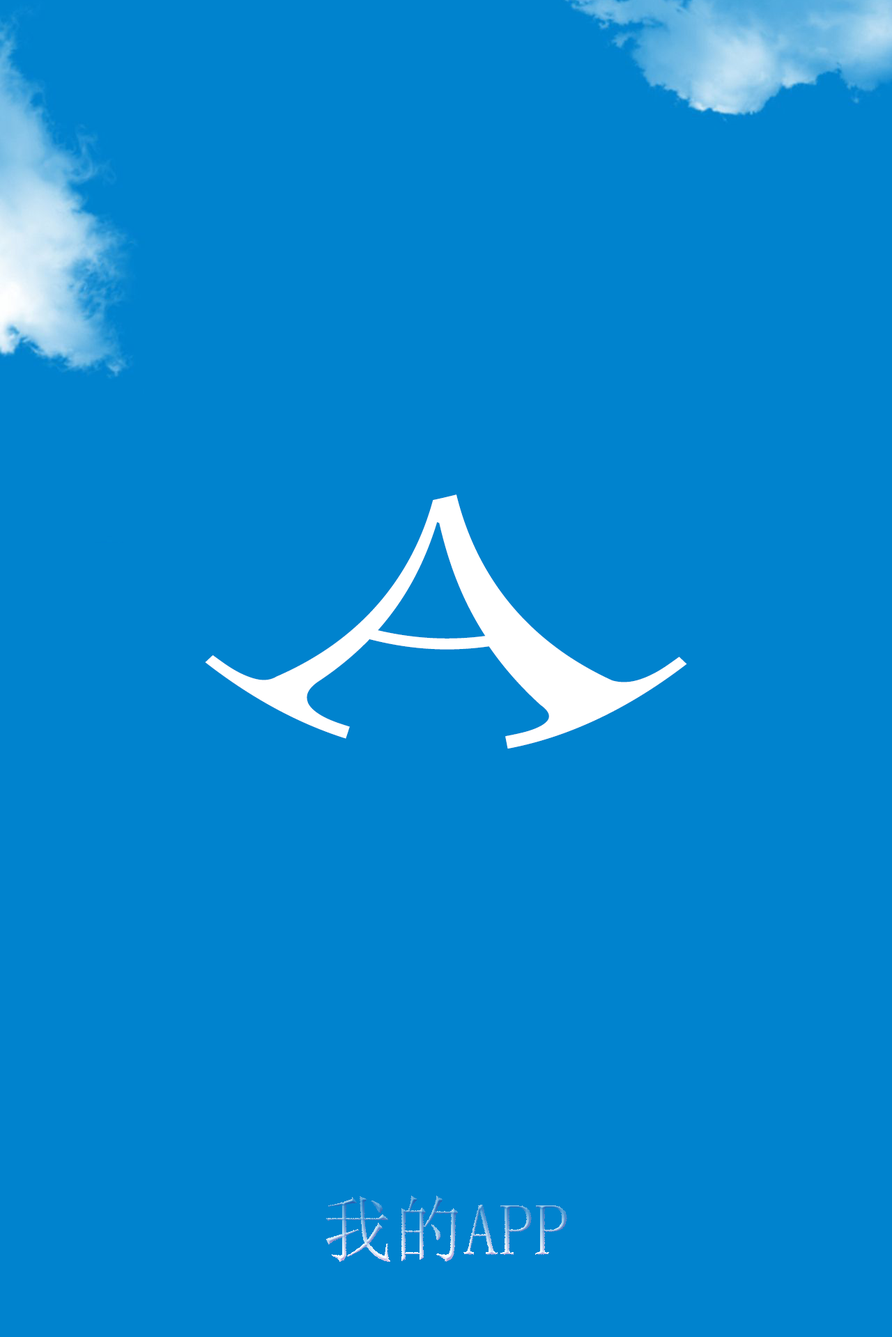
<style>
.page{position:relative;width:892px;height:1337px;background:#0083ce}
.page>*{position:absolute;margin:0}
.t1{font:356.1px "SimSun";color:#ffffff;scale:0.86 1}
.t2{font:73px "SimSun";scale:0.97 1}
</style>
<div class="page">
<p class="t1" style="left:205px;top:495px;width:482px;height:254px">A</p>
<p class="t2" style="left:325px;top:1196px;width:242px;height:67px">我的APP</p>
</div>
